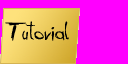
<style>
.page{position:relative;width:128px;height:64px;background:#ff00ff}
.page>*{position:absolute;margin:0}
.t1{font:24px "Daubed";color:#000000}
</style>
<div class="page">
<p class="t1" style="left:5px;top:21px;width:64px;height:20px">Tutorial</p>
</div>
